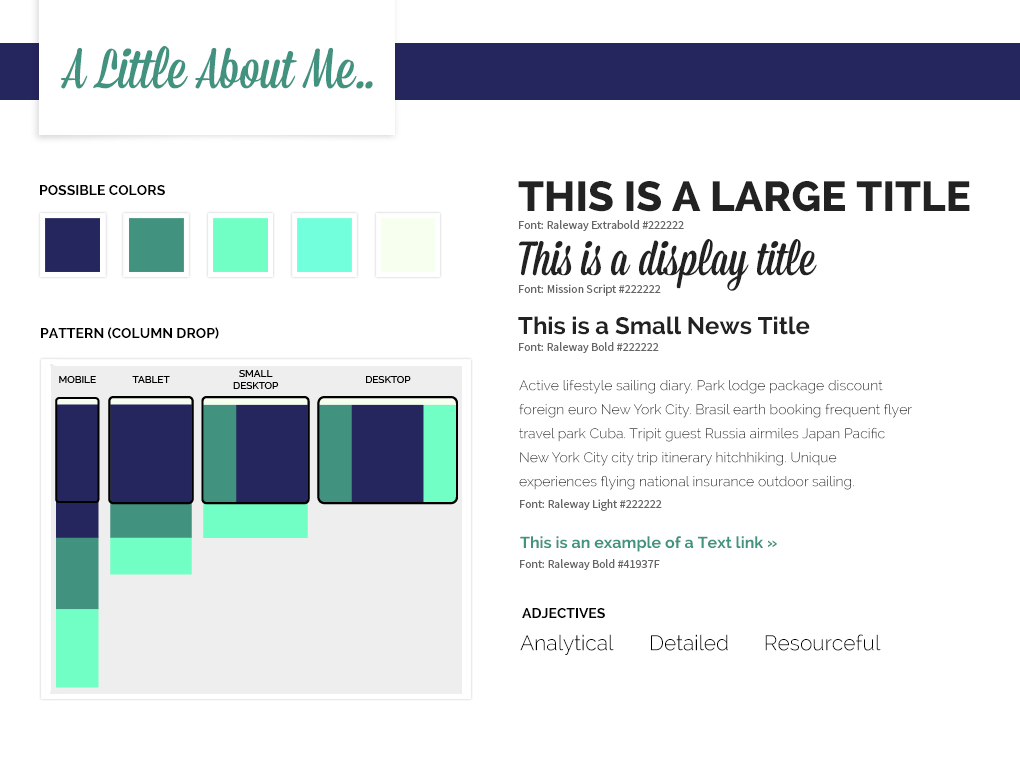
<style>
.page{position:relative;width:1020px;height:760px;background:#ffffff}
.page>*{position:absolute;margin:0}
.t1{font:56px "Mission-Script";color:#41937f}
.t2{font:14px "Raleway-Bold";color:#000000;text-transform:uppercase}
.t3{font:42px "Raleway-ExtraBold";color:#222222;text-transform:uppercase}
.t4{font:12px "SourceSansPro-Regular";color:#666666}
.t5{font:48px "Mission-Script";color:#222222}
.t6{font:24px "Raleway-Bold";color:#222222}
.t7{font:14px "Raleway-Bold";color:#000000}
.t8{font:14px/24px "Raleway-Light"}
.t9{font:16px "Raleway-Bold";color:#41937f}
.t10{font:21px "Raleway-Light";color:#000000}
</style>
<div class="page">
<p class="t1" style="left:61px;top:46px;width:312px;height:43px">A Little About Me..</p>
<p class="t2" style="left:40px;top:185px;width:125px;height:11px">Possible Colors</p>
<p class="t3" style="left:518px;top:181px;width:452px;height:31px">This is a Large Title</p>
<p class="t4" style="left:519px;top:220px;width:165px;height:11px">Font: Raleway Extrabold #222222</p>
<p class="t5" style="left:518px;top:239px;width:299px;height:52px">This is a display title</p>
<p class="t4" style="left:519px;top:284px;width:142px;height:12px">Font: Mission Script #222222</p>
<p class="t6" style="left:518px;top:316px;width:292px;height:19px">This is a Small News Title</p>
<p class="t7" style="left:41px;top:327px;width:178px;height:12px">PATTERN (COLUMN DROP)</p>
<p class="t4" style="left:519px;top:342px;width:140px;height:11px">Font: Raleway Bold #222222</p>
<p class="t8" style="left:519px;top:379px;width:393px;height:111px">Active lifestyle sailing diary. Park lodge package discount foreign euro New York City. Brasil earth booking frequent flyer travel park Cuba. Tripit guest Russia airmiles Japan Pacific New York City city trip itinerary hitchhiking. Unique experiences flying national insurance outdoor sailing.</p>
<p class="t4" style="left:520px;top:499px;width:142px;height:12px">Font: Raleway Light #222222</p>
<p class="t9" style="left:520px;top:536px;width:257px;height:16px">This is an example of a Text link »</p>
<p class="t4" style="left:520px;top:559px;width:140px;height:11px">Font: Raleway Bold #41937F</p>
<p class="t2" style="left:522px;top:608px;width:83px;height:11px">Adjectives</p>
<p class="t10" style="left:520px;top:634px;width:94px;height:21px">Analytical</p>
<p class="t10" style="left:651px;top:634px;width:77px;height:17px">Detailed</p>
<p class="t10" style="left:765px;top:634px;width:116px;height:17px">Resourceful</p>
</div>
